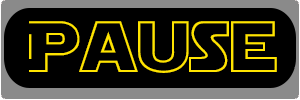
<style>
.page{position:relative;width:300px;height:100px;background:#000000}
.page>*{position:absolute;margin:0}
.t1{font:72px "StarJediHollow";color:#ffe400}
</style>
<div class="page">
<p class="t1" style="left:29px;top:21px;width:248px;height:52px">Pause</p>
</div>
